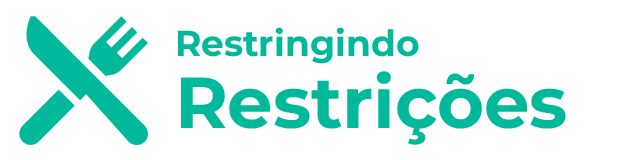
<style>
.page{position:relative;width:640px;height:160px;background:#ffffff}
.page>*{position:absolute;margin:0}
.t1{font:36px/72px "Montserrat-Bold";color:#00b99a}
.t2{font:72px/72px "Montserrat-Bold";color:#00b99a}
</style>
<div class="page">
<p class="t1" style="left:178px;top:27px;width:388px;height:118px">Restringindo<br><span class="t2">Restrições</span></p>
</div>
